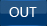
<style>
.page{position:relative;width:47px;height:26px;background:#00376d}
.page>*{position:absolute;margin:0}
.t1{font:14px "Ebrima";color:#ffffff}
</style>
<div class="page">
<p class="t1" style="left:9px;top:7px;width:28px;height:10px">OUT</p>
</div>
